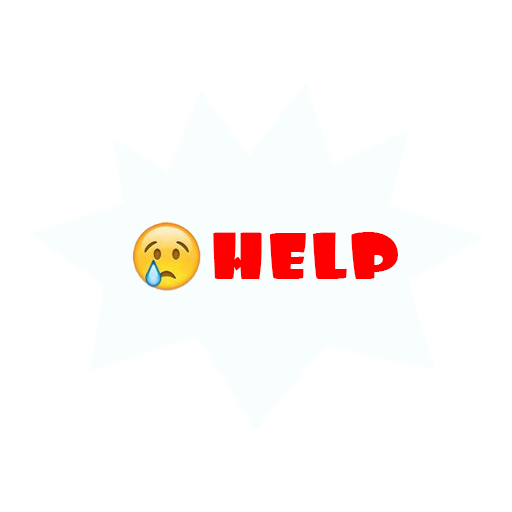
<style>
.page{position:relative;width:512px;height:512px;background:#ffffff}
.page>*{position:absolute;margin:0}
.t1{font:67.5px "Foo-Regular";letter-spacing:0.025em;color:#ff0000;scale:1.11 1}
</style>
<div class="page">
<p class="t1" style="left:213px;top:232px;width:185px;height:47px">HELP</p>
</div>
